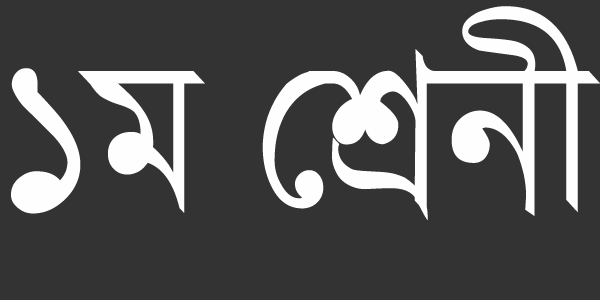
<style>
.page{position:relative;width:600px;height:300px;background:#333333}
.page>*{position:absolute;margin:0}
.t1{font:219.8px "KalpurushANSI";color:#fefefe;scale:0.93 1}
</style>
<div class="page">
<p class="t1" style="left:11px;top:6px;width:590px;height:214px">1g †kÖbx</p>
</div>
